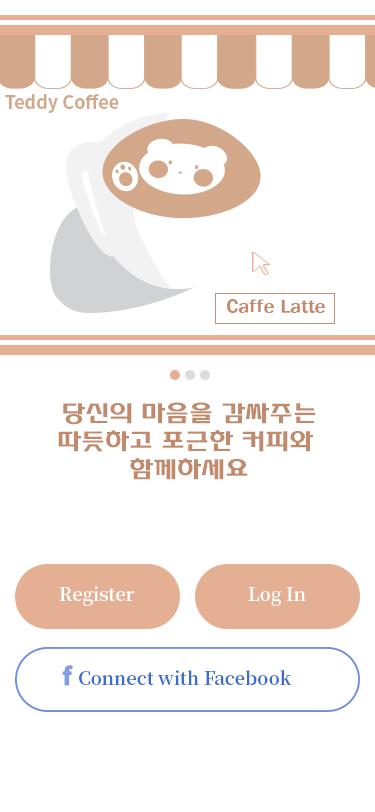
<style>
.page{position:relative;width:375px;height:812px;background:#ffffff}
.page>*{position:absolute;margin:0}
.t1{font:18px "NotoSansKR-Bold";color:#d3a88a}
.t2{font:18px "HYsupB";color:#c18a6d}
.t3{font:24px/28px "HYsupB";color:#c18a6d}
.t4{font:18px "NotoSerifKR-Bold";color:#ffffff}
.t5{font:24px "NotoSansKR-Black";color:#819be5}
.t6{font:18px "NotoSerifKR-Bold";color:#3b6eca}
</style>
<div class="page">
<p class="t1" style="left:5px;top:94px;width:114px;height:19px">Teddy Coffee</p>
<p class="t2" style="left:227px;top:299px;width:98px;height:14px">Caffe Latte</p>
<p class="t3" style="left:58px;top:402px;width:258px;height:78px;text-align:center">당신의 마음을 감싸주는<br>따듯하고 포근한 커피와 <br>함께하세요</p>
<p class="t4" style="left:59px;top:586px;width:76px;height:20px">Register</p>
<p class="t4" style="left:248px;top:587px;width:58px;height:19px">Log In</p>
<p class="t5" style="left:62px;top:665px;width:11px;height:21px">f</p>
<p class="t6" style="left:79px;top:670px;width:213px;height:15px">Connect with Facebook</p>
</div>
